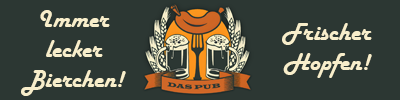
<style>
.page{position:relative;width:400px;height:100px;background:#2c3733}
.page>*{position:absolute;margin:0}
.t1{font:25px "HarlowSolid";color:#f8eecb}
</style>
<div class="page">
<p class="t1" style="left:21px;top:10px;width:105px;height:86px;text-align:center">Immer <br>lecker <br>Bierchen!</p>
<p class="t1" style="left:282px;top:23px;width:90px;height:55px;text-align:center">Frischer<br>Hopfen!</p>
</div>
